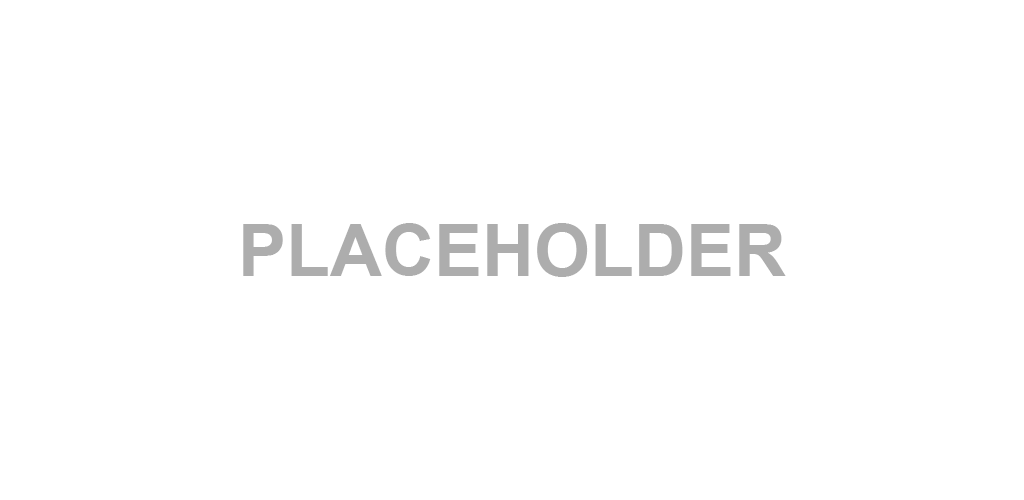
<style>
.page{position:relative;width:1024px;height:500px;background:#ffffff}
.page>*{position:absolute;margin:0}
.t1{font:72px "Arial-BoldMT";color:#adadad}
</style>
<div class="page">
<p class="t1" style="left:243px;top:223px;width:543px;height:54px">PLACEHOLDER</p>
</div>
